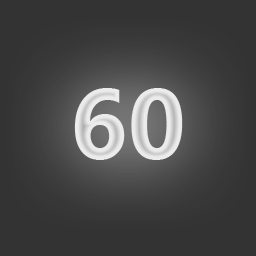
<style>
.page{position:relative;width:256px;height:256px;background:#333333}
.page>*{position:absolute;margin:0}
.t1{font:100px "MicrosoftTaiLe-Bold";color:#ebebeb}
</style>
<div class="page">
<p class="t1" style="left:74px;top:88px;width:109px;height:72px">60</p>
</div>
